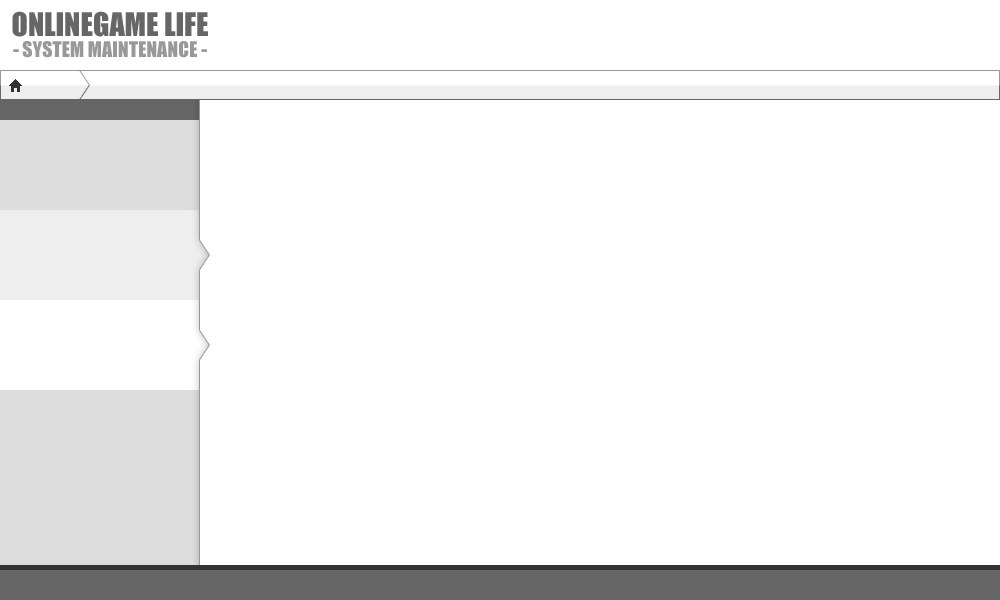
<style>
.page{position:relative;width:1000px;height:600px;background:#ffffff}
.page>*{position:absolute;margin:0}
.t1{font:20px/30px "Impact";color:#999999}
.t2{font:30px/30px "Impact";color:#666666}
</style>
<div class="page">
<p class="t1" style="left:12px;top:11px;width:196px;height:47px;text-align:center"><span class="t2">ONLINEGAME LIFE<br></span>- SYSTEM MAINTENANCE -</p>
</div>
